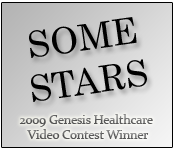
<style>
.page{position:relative;width:175px;height:150px}
.page>*{position:absolute;margin:0}
.t1{font:36.2px "Century";color:#000000}
.t2{font:12.5px "Constantia"}
</style>
<div class="page">
<p class="t1" style="left:29px;top:17px;width:118px;height:85px;text-align:center;rotate:-8deg">SOME<br>STARS</p>
<p class="t2" style="left:19px;top:114px;width:134px;height:25px;text-align:center">2009 Genesis Healthcare <br>Video Contest Winner</p>
</div>
